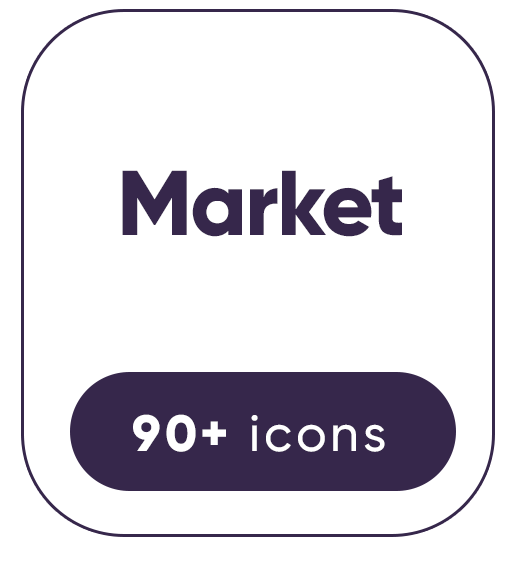
<style>
.page{position:relative;width:522px;height:562px;background:#ffffff}
.page>*{position:absolute;margin:0}
.t1{font:91.7px "Gilroy-ExtraBold";letter-spacing:-0.025em;color:#36274b}
.t2{font:50.9px "Gilroy-Medium";letter-spacing:0.075em;color:#ffffff}
.t3{font:50.9px "Gilroy-ExtraBold";letter-spacing:0.075em;color:#ffffff}
</style>
<div class="page">
<p class="t1" style="left:122px;top:170px;width:280px;height:67px">Market</p>
<p class="t2" style="left:133px;top:414px;width:252px;height:38px"><span class="t3">90+ </span>icons</p>
</div>
